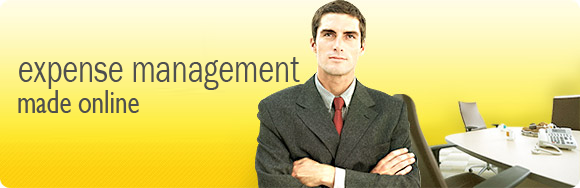
<style>
.page{position:relative;width:580px;height:188px}
.page>*{position:absolute;margin:0}
.t1{font:40px "FranklinGothic-Book";color:#4f4f4f;scale:0.75 1}
.t2{font:33px "GillSansMT";color:#4f4f4f;scale:0.75 1}
</style>
<div class="page">
<p class="t1" style="left:19px;top:57px;width:281px;height:33px">expense management</p>
<p class="t2" style="left:18px;top:90px;width:121px;height:23px">made online</p>
</div>
